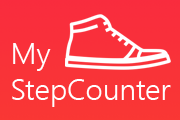
<style>
.page{position:relative;width:180px;height:120px}
.page>*{position:absolute;margin:0}
.t1{font:30px "SegoeUI-Semilight";color:#ffffff}
</style>
<div class="page">
<p class="t1" style="left:12px;top:43px;width:159px;height:64px">My <br>StepCounter</p>
</div>
